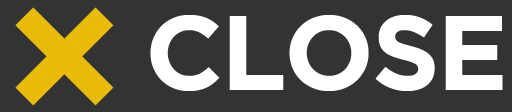
<style>
.page{position:relative;width:512px;height:112px;background:#333333}
.page>*{position:absolute;margin:0}
.t1{font:105.6px "GothamBold";letter-spacing:-0.02em;color:#ffffff}
</style>
<div class="page">
<p class="t1" style="left:150px;top:15px;width:353px;height:76px">CLOSE</p>
</div>
